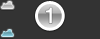
<style>
.page{position:relative;width:100px;height:39px;background:#333333}
.page>*{position:absolute;margin:0}
.t1{font:22px "Helvetica";color:#ffffff}
</style>
<div class="page">
<p class="t1" style="left:46px;top:7px;width:6px;height:16px">1</p>
</div>
